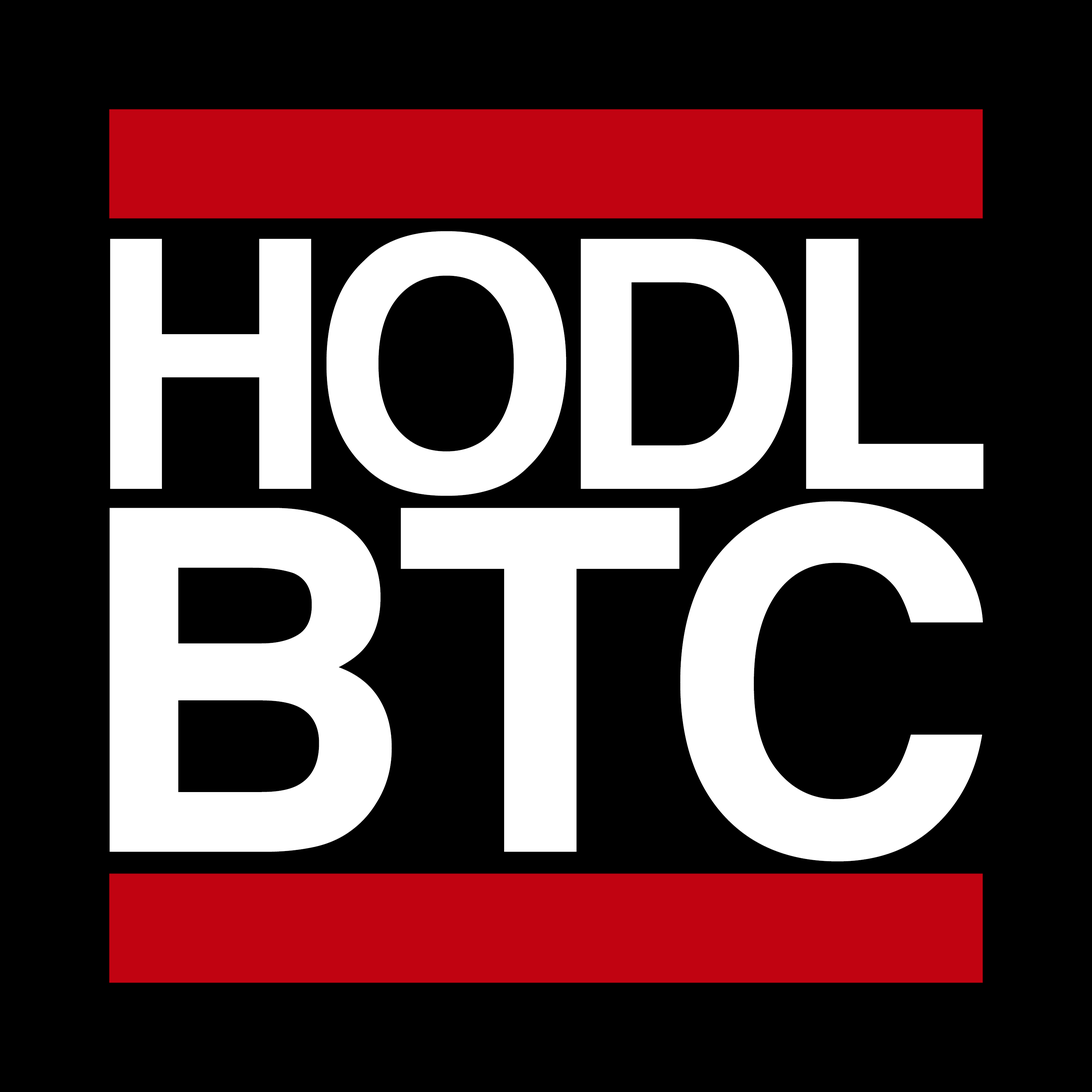
<style>
.page{position:relative;width:1092px;height:1092px;background:#000000}
.page>*{position:absolute;margin:0}
.t1{font:347.3px/86.2px "Helvetica-Bold";letter-spacing:-0.073em;color:#ffffff;text-transform:uppercase}
.t2{font:477.7px/95.3px "Helvetica-Bold";letter-spacing:-0.05em;color:#ffffff;text-transform:uppercase}
</style>
<div class="page">
<p class="t1" style="left:110px;top:231px;width:874px;height:631px">HODL<br><br><br><br><span class="t2">BTC</span></p>
</div>
